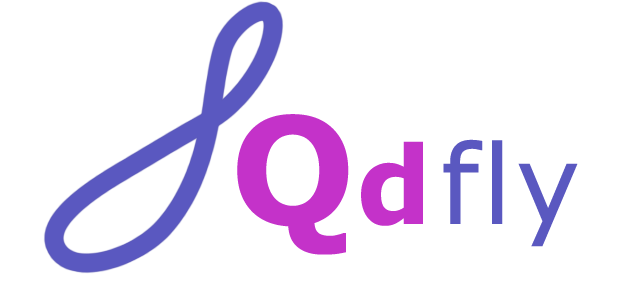
<style>
.page{position:relative;width:620px;height:300px;background:#ffffff}
.page>*{position:absolute;margin:0}
.t1{font:110px "Verdana";letter-spacing:0.03em;color:#5a58c0}
.t2{font:148px "Verdana-Bold";letter-spacing:0.005em;color:#c432c9}
.t3{font:108px "Verdana-Bold";letter-spacing:0.075em;color:#c432c9}
</style>
<div class="page">
<p class="t1" style="left:237px;top:114px;width:341px;height:141px"><span class="t2">Q</span><span class="t3">d</span>fly</p>
</div>
